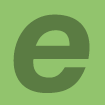
<style>
.page{position:relative;width:105px;height:105px;background:#92c46d}
.page>*{position:absolute;margin:0}
.t1{font:144px "HelveticaNeue-BoldItalic";color:#5b7c43}
</style>
<div class="page">
<p class="t1" style="left:13px;top:14px;width:77px;height:79px">e</p>
</div>
